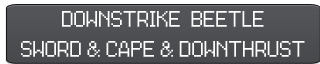
<style>
.page{position:relative;width:320px;height:64px}
.page>*{position:absolute;margin:0}
.t1{font:18px "ZeldaOracles";color:#ffffff}
</style>
<div class="page">
<p class="t1" style="left:21px;top:11px;width:284px;height:46px;text-align:center">DOWNSTRIKE  BEETLE<br>SWORD &amp; CAPE &amp; DOWNTHRUST</p>
</div>
